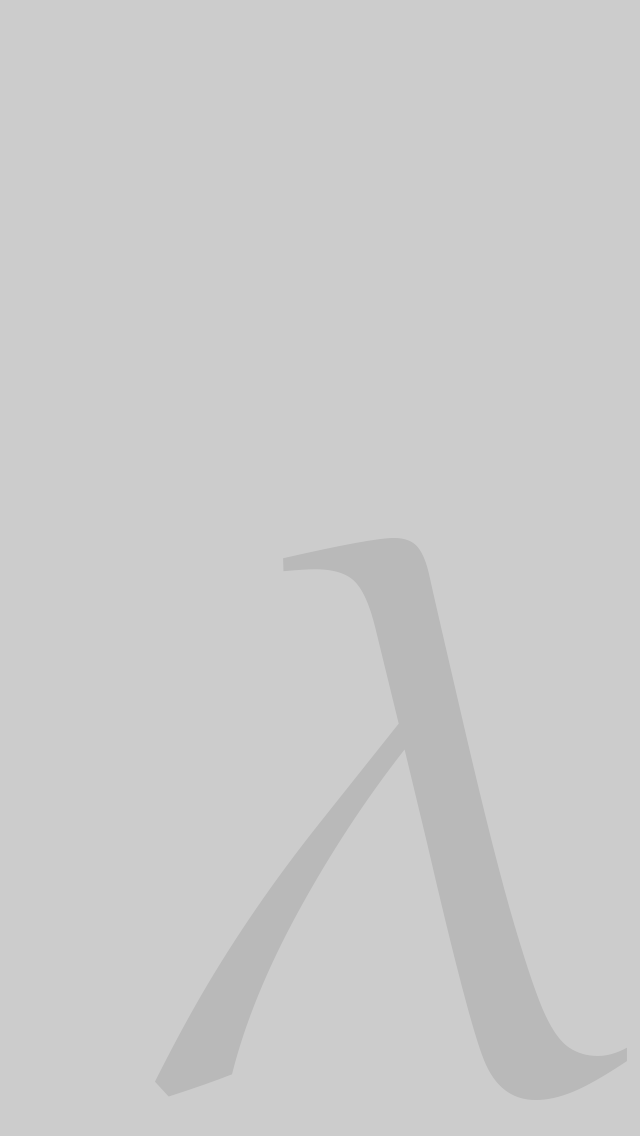
<style>
.page{position:relative;width:640px;height:1136px;background:#cccccc}
.page>*{position:absolute;margin:0}
.t1{font:800px "Palatino-Roman";letter-spacing:-0.1em;color:#b9b9b9}
</style>
<div class="page">
<p class="t1" style="left:155px;top:538px;width:472px;height:562px">λ</p>
</div>
